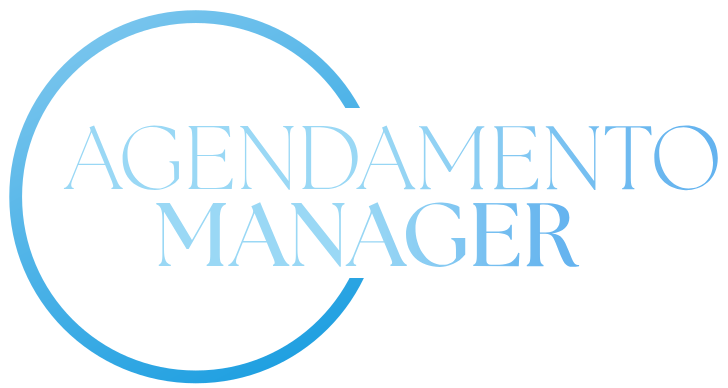
<style>
.page{position:relative;width:728px;height:388px;background:#ffffff}
.page>*{position:absolute;margin:0}
.t1{font:90px "FONTSPRINGDEMO-TheSeasonsLightRegular";color:#97d5f4}
.t2{font:90px "FONTSPRINGDEMO-TheSeasonsBold"}
</style>
<div class="page">
<p class="t1" style="left:63px;top:125px;width:655px;height:66px">AGENDAMENTO</p>
<p class="t2" style="left:156px;top:202px;width:424px;height:66px">MANAGER</p>
</div>
